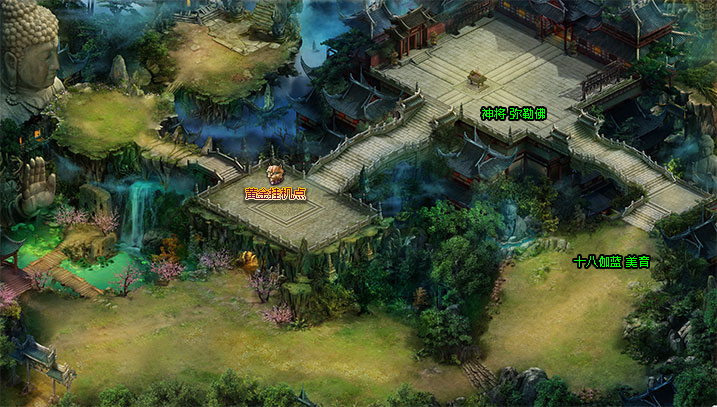
<style>
.page{position:relative;width:717px;height:407px}
.page>*{position:absolute;margin:0}
.t1{font:12px "MicrosoftYaHei";color:#00ff00}
.t2{font:12px "MicrosoftYaHei";color:#701633}
</style>
<div class="page">
<p class="t1" style="left:482px;top:108px;width:63px;height:11px">神将 弥勒佛</p>
<p class="t2" style="left:246px;top:188px;width:59px;height:11px">黄金挂机点</p>
<p class="t1" style="left:574px;top:256px;width:75px;height:11px">十八伽蓝 美音</p>
</div>
